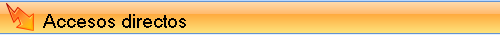
<style>
.page{position:relative;width:500px;height:35px}
.page>*{position:absolute;margin:0}
.t1{font:18px "MS Sans Serif";color:#000000}
</style>
<div class="page">
<p class="t1" style="left:43px;top:14px;width:143px;height:14px">Accesos directos</p>
</div>
